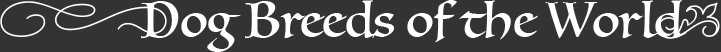
<style>
.page{position:relative;width:721px;height:52px;background:#333333}
.page>*{position:absolute;margin:0}
.t1{font:60px "BelovedOrnaments";color:#ffffff}
.t2{font:48px "Luminari-Regular";color:#ffffff}
</style>
<div class="page">
<p class="t1" style="left:0px;top:1px;width:167px;height:36px">7</p>
<p class="t2" style="left:141px;top:0px;width:546px;height:52px">Dog Breeds of the World</p>
<p class="t1" style="left:657px;top:2px;width:63px;height:37px">w</p>
</div>
